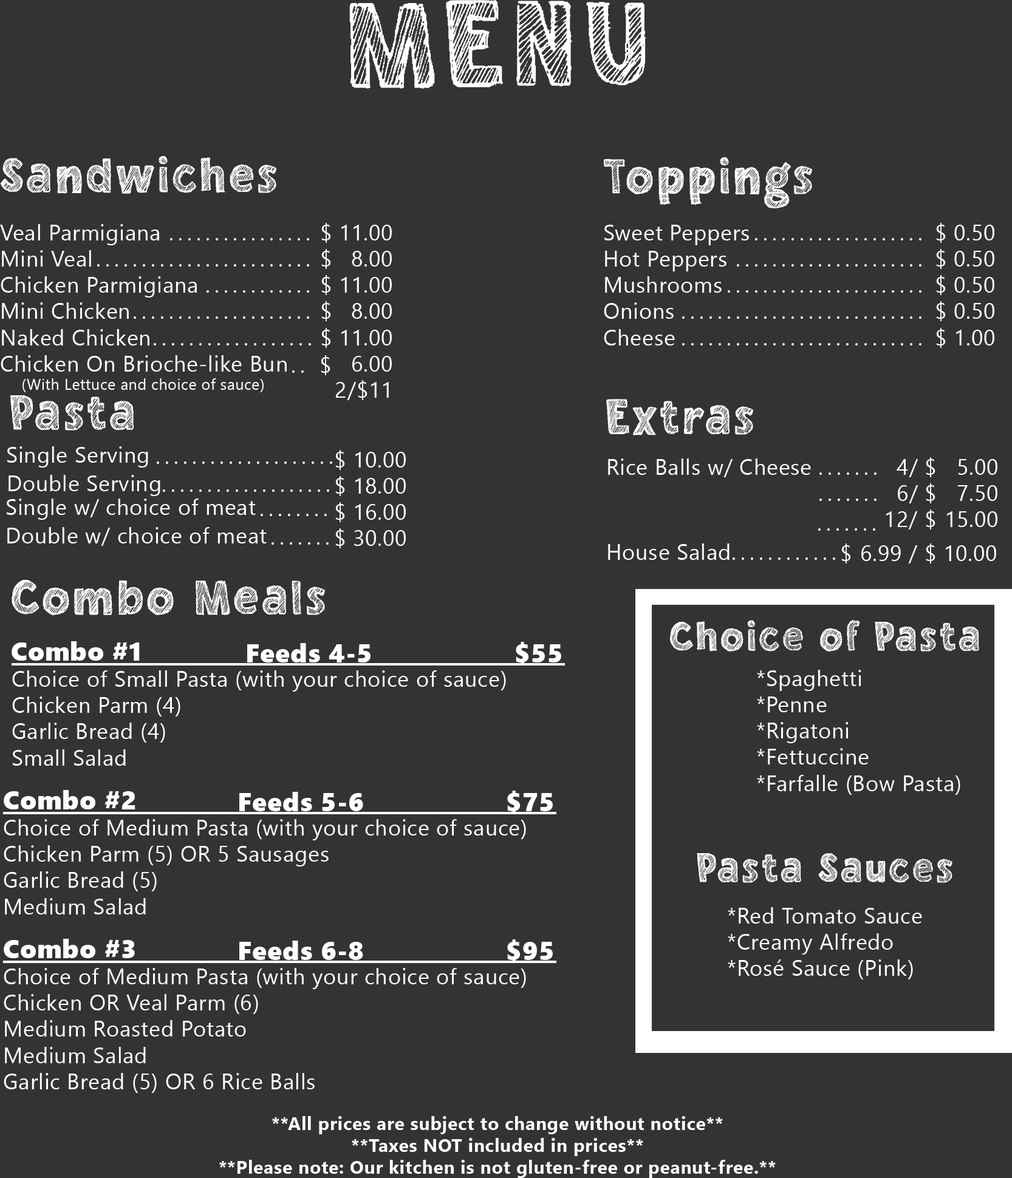
<style>
.page{position:relative;width:1012px;height:1178px;background:#333333}
.page>*{position:absolute;margin:0}
.t1{font:151.9px "Chalkboy-Regular";letter-spacing:0.025em;color:#ffffff}
.t2{font:60.7px "Chalkboy-Regular";letter-spacing:0.025em;color:#ffffff}
.t3{font:21.9px "SegoeUI";letter-spacing:0.025em;color:#ffffff}
.t4{font:15.2px "SegoeUI";letter-spacing:0.025em;color:#ffffff}
.t5{font:21.9px "SegoeUI";letter-spacing:0.2em;color:#ffffff}
.t6{font:60.7px "ChalkboyRegular";letter-spacing:0.025em;color:#ffffff}
.t7{font:51.1px "ChalkboyRegular";letter-spacing:0.025em;color:#ffffff}
.t8{font:26px "SegoeUIBlack";letter-spacing:0.025em;color:#ffffff}
.t9{font:18.2px "SegoeUI-Bold";letter-spacing:0.025em;color:#ffffff}
</style>
<div class="page">
<p class="t1" style="left:349px;top:0px;width:297px;height:89px">MENU</p>
<p class="t2" style="left:0px;top:156px;width:276px;height:38px">Sandwiches</p>
<p class="t2" style="left:603px;top:157px;width:209px;height:51px">Toppings</p>
<p class="t3" style="left:0px;top:224px;width:287px;height:168px">Veal Parmigiana<br>Mini Veal<br>Chicken Parmigiana<br>Mini Chicken<br>Naked Chicken<br>Chicken On Brioche-like Bun<br><span class="t4"> (With Lettuce and choice of sauce)</span></p>
<p class="t3" style="left:321px;top:223px;width:71px;height:177px;text-align:right">$ 11.00<br>$ 8.00<br>$ 11.00<br>$ 8.00<br>$ 11.00<br>6.00<br>2/$11</p>
<p class="t3" style="left:604px;top:225px;width:145px;height:121px">Sweet Peppers<br>Hot Peppers<br>Mushrooms<br>Onions<br>Cheese</p>
<p class="t3" style="left:936px;top:223px;width:58px;height:125px;text-align:right">$ 0.50<br>$ 0.50<br>$ 0.50<br>$ 0.50<br>$ 1.00</p>
<p class="t5" style="left:170px;top:238px;width:139px;height:3px">................</p>
<p class="t5" style="left:755px;top:238px;width:166px;height:3px">...................</p>
<p class="t5" style="left:97px;top:264px;width:212px;height:3px">........................</p>
<p class="t5" style="left:737px;top:264px;width:184px;height:3px">.....................</p>
<p class="t5" style="left:207px;top:290px;width:102px;height:3px">............</p>
<p class="t5" style="left:728px;top:290px;width:193px;height:3px">......................</p>
<p class="t5" style="left:134px;top:316px;width:175px;height:3px">....................</p>
<p class="t5" style="left:682px;top:316px;width:239px;height:3px">...........................</p>
<p class="t5" style="left:154px;top:343px;width:157px;height:3px">..................</p>
<p class="t5" style="left:682px;top:343px;width:239px;height:3px">...........................</p>
<p class="t5" style="left:292px;top:355px;width:38px;height:20px">.. $</p>
<p class="t6" style="left:10px;top:395px;width:124px;height:36px">Pasta</p>
<p class="t6" style="left:606px;top:399px;width:147px;height:37px">Extras</p>
<p class="t3" style="left:7px;top:446px;width:141px;height:22px">Single Serving</p>
<p class="t5" style="left:157px;top:462px;width:175px;height:2px">....................</p>
<p class="t3" style="left:335px;top:450px;width:71px;height:98px;text-align:right">$ 10.00<br>$ 18.00<br>$ 16.00<br>$ 30.00</p>
<p class="t3" style="left:608px;top:459px;width:203px;height:18px">Rice Balls w/ Cheese</p>
<p class="t3" style="left:886px;top:457px;width:111px;height:73px;text-align:right">4/ $   5.00<br>6/ $   7.50<br>12/ $ 15.00</p>
<p class="t5" style="left:819px;top:473px;width:57px;height:2px">.......</p>
<p class="t3" style="left:9px;top:475px;width:151px;height:21px">Double Serving</p>
<p class="t5" style="left:163px;top:490px;width:166px;height:2px">...................</p>
<p class="t3" style="left:7px;top:499px;width:249px;height:21px">Single w/ choice of meat</p>
<p class="t5" style="left:819px;top:499px;width:57px;height:2px">.......</p>
<p class="t5" style="left:261px;top:514px;width:66px;height:2px">........</p>
<p class="t3" style="left:7px;top:527px;width:260px;height:19px">Double w/ choice of meat</p>
<p class="t5" style="left:818px;top:528px;width:57px;height:3px">.......</p>
<p class="t5" style="left:272px;top:542px;width:57px;height:3px">.......</p>
<p class="t3" style="left:608px;top:544px;width:121px;height:16px">House Salad</p>
<p class="t3" style="left:841px;top:544px;width:155px;height:20px">$ 6.99 / $ 10.00</p>
<p class="t5" style="left:733px;top:558px;width:102px;height:2px">............</p>
<p class="t6" style="left:12px;top:580px;width:313px;height:35px">Combo Meals</p>
<p class="t7" style="left:670px;top:620px;width:309px;height:32px">Choice of Pasta</p>
<p class="t8" style="left:12px;top:641px;width:128px;height:20px">Combo #1</p>
<p class="t8" style="left:247px;top:642px;width:314px;height:23px">Feeds 4-5                  $55</p>
<p class="t3" style="left:12px;top:671px;width:494px;height:95px">Choice of Small Pasta (with your choice of sauce)<br>Chicken Parm (4)<br>Garlic Bread (4)<br>Small Salad</p>
<p class="t3" style="left:757px;top:670px;width:203px;height:125px">*Spaghetti<br>*Penne<br>*Rigatoni<br>*Fettuccine<br>*Farfalle (Bow Pasta)</p>
<p class="t8" style="left:4px;top:790px;width:131px;height:20px">Combo #2</p>
<p class="t8" style="left:239px;top:791px;width:314px;height:23px">Feeds 5-6                  $75</p>
<p class="t3" style="left:4px;top:819px;width:522px;height:96px">Choice of Medium Pasta (with your choice of sauce)<br>Chicken Parm (5) OR 5 Sausages<br>Garlic Bread (5)<br>Medium Salad</p>
<p class="t7" style="left:697px;top:853px;width:255px;height:30px">Pasta Sauces</p>
<p class="t3" style="left:728px;top:907px;width:194px;height:73px">*Red Tomato Sauce<br>*Creamy Alfredo<br>*Rosé Sauce (Pink)</p>
<p class="t8" style="left:4px;top:939px;width:131px;height:19px">Combo #3</p>
<p class="t8" style="left:239px;top:940px;width:314px;height:23px">Feeds 6-8                  $95</p>
<p class="t3" style="left:4px;top:968px;width:522px;height:125px">Choice of Medium Pasta (with your choice of sauce)<br>Chicken OR Veal Parm (6)<br>Medium Roasted Potato<br>Medium Salad<br>Garlic Bread (5) OR 6 Rice Balls</p>
<p class="t9" style="left:219px;top:1116px;width:557px;height:62px;text-align:center">**All prices are subject to change without notice**<br>**Taxes NOT included in prices**<br>**Please note: Our kitchen is not gluten-free or peanut-free.**</p>
</div>
